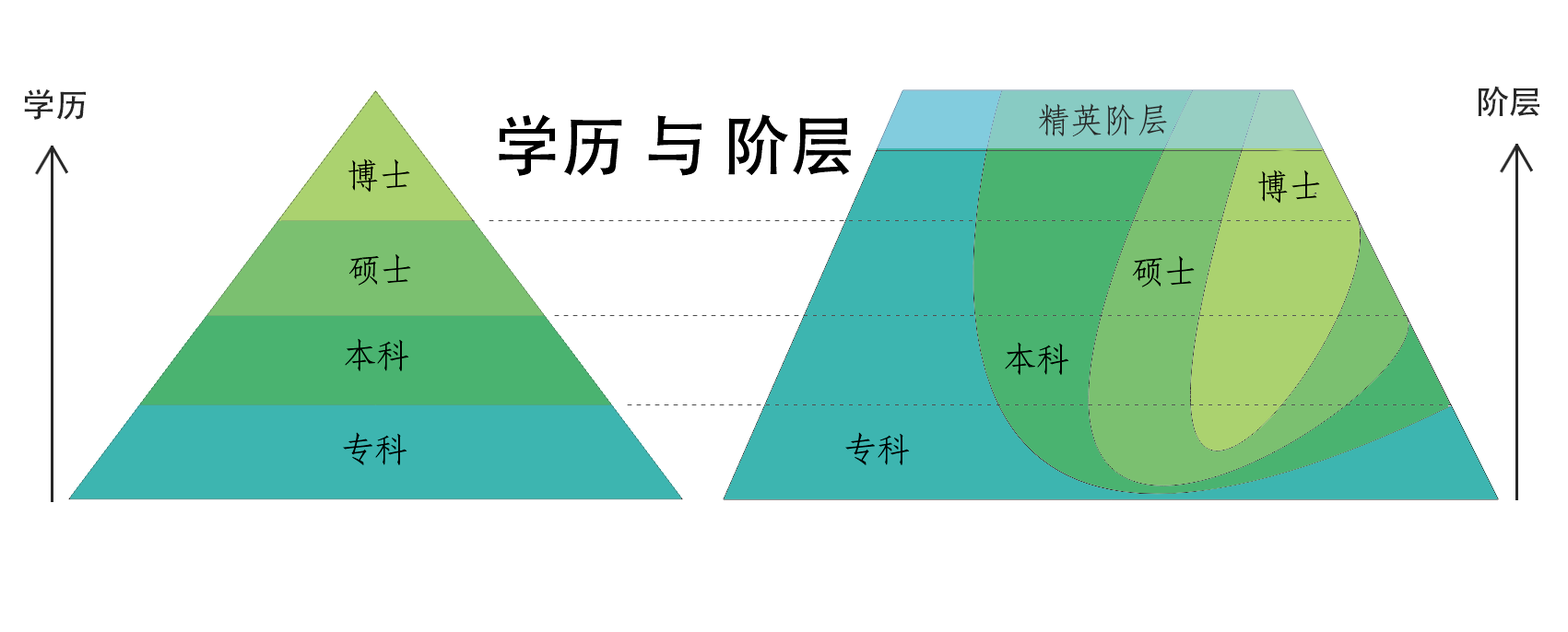
<style>
.page{position:relative;width:1568px;height:632px;background:#ffffff}
.page>*{position:absolute;margin:0}
.t1{font:33.2px "AdobeHeitiStd-Regular";color:#272727}
.t2{font:33.2px "AdobeFangsongStd-Regular";color:#272727}
.t3{font:66.4px "AdobeHeitiStd-Regular";color:#000000}
.t4{font:33.2px "AdobeFangsongStd-Regular";color:#000000}
</style>
<div class="page">
<p class="t1" style="left:24px;top:88px;width:62px;height:32px">学历</p>
<p class="t1" style="left:1478px;top:86px;width:61px;height:31px">阶层</p>
<p class="t2" style="left:1039px;top:103px;width:128px;height:34px">精英阶层</p>
<p class="t3" style="left:499px;top:114px;width:352px;height:62px">学历 与 阶层</p>
<p class="t4" style="left:348px;top:159px;width:62px;height:34px">博士</p>
<p class="t4" style="left:1257px;top:170px;width:63px;height:34px">博士</p>
<p class="t4" style="left:348px;top:254px;width:63px;height:32px">硕士</p>
<p class="t4" style="left:1132px;top:256px;width:63px;height:32px">硕士</p>
<p class="t4" style="left:345px;top:338px;width:64px;height:33px">本科</p>
<p class="t4" style="left:1005px;top:342px;width:64px;height:33px">本科</p>
<p class="t4" style="left:343px;top:432px;width:64px;height:34px">专科</p>
<p class="t4" style="left:845px;top:432px;width:65px;height:34px">专科</p>
</div>
